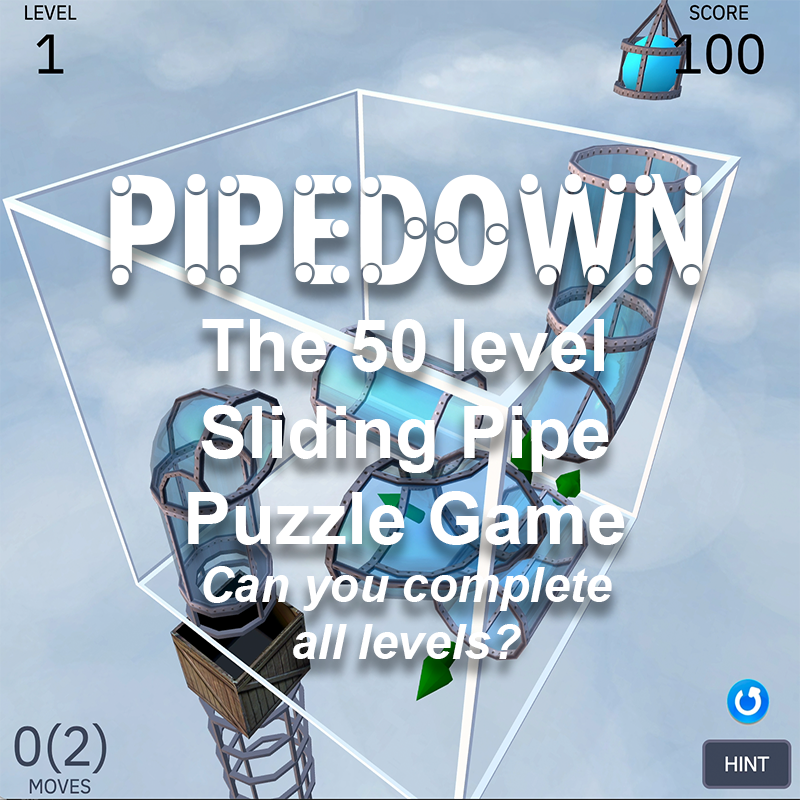
<style>
.page{position:relative;width:800px;height:800px}
.page>*{position:absolute;margin:0}
.t1{font:72px "Arial-BoldMT";color:#ffffff}
.t2{font:150px "PIPEFONT";color:#ffffff}
.t3{font:48px "Arial-BoldItalicMT";color:#ffffff}
</style>
<div class="page">
<p class="t1" style="left:110px;top:174px;width:592px;height:485px;text-align:center"><span class="t2">PIPEDOWN<br></span>The 50 level<br>Sliding Pipe<br>Puzzle Game<br><span class="t3">Can you complete<br>all levels?</span></p>
</div>
